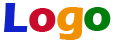
<style>
.page{position:relative;width:114px;height:41px;background:#ffffff}
.page>*{position:absolute;margin:0}
.t1{font:44px "ErasITC-Bold";color:#1122cc}
.t2{font:44px "ErasITC-Bold";color:#c90a2b}
.t3{font:44px "ErasITC-Bold";color:#f09102}
.t4{font:44px "ErasITC-Bold";color:#007e0c}
</style>
<div class="page">
<p class="t1" style="left:4px;top:3px;width:24px;height:29px">L</p>
<p class="t2" style="left:29px;top:8px;width:27px;height:24px">o</p>
<p class="t3" style="left:57px;top:7px;width:26px;height:33px">g</p>
<p class="t4" style="left:84px;top:7px;width:27px;height:24px">o</p>
</div>
